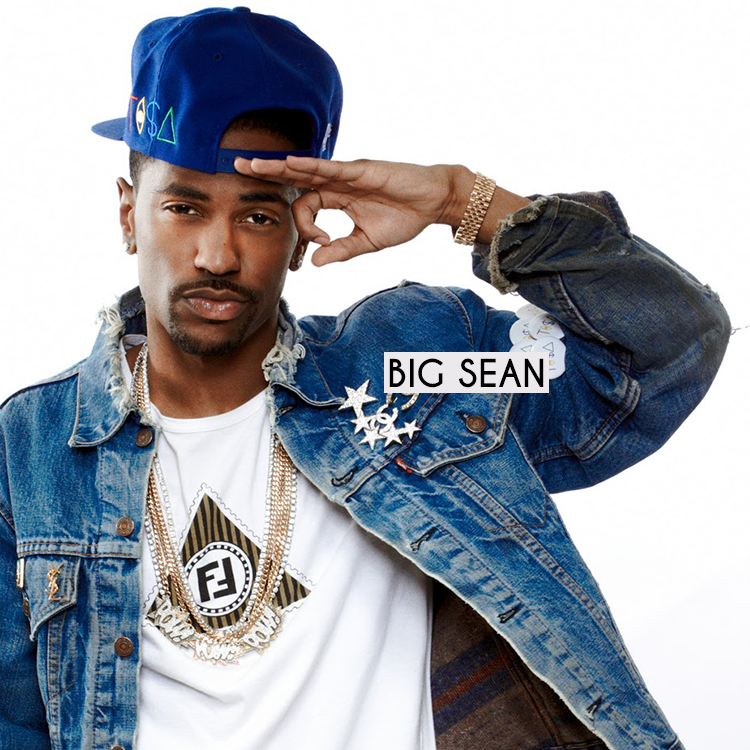
<style>
.page{position:relative;width:750px;height:750px}
.page>*{position:absolute;margin:0}
.t1{font:36px "CaviarDreams-Bold";color:#000000}
</style>
<div class="page">
<p class="t1" style="left:389px;top:358px;width:155px;height:30px">BIG SEAN</p>
</div>
